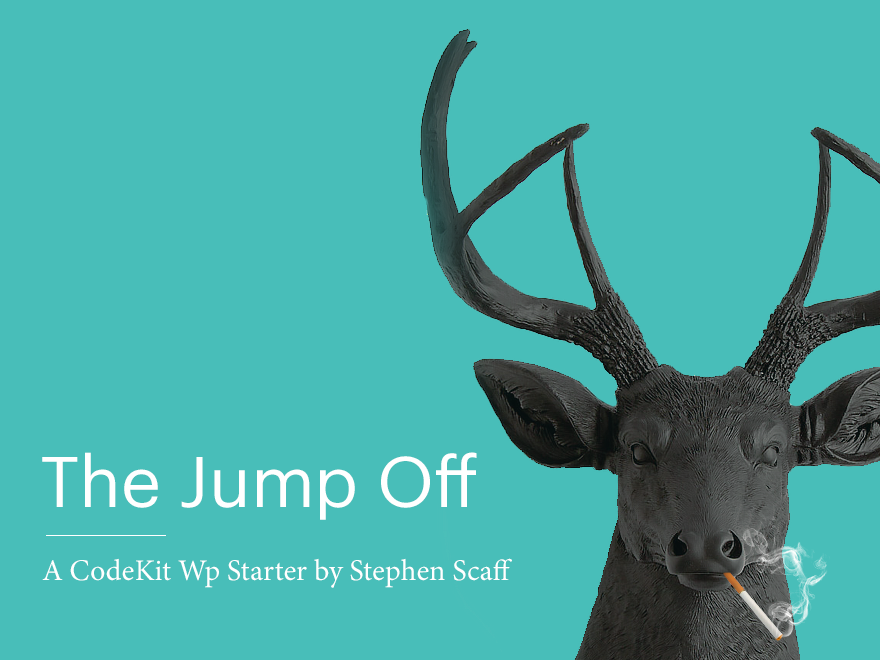
<style>
.page{position:relative;width:880px;height:660px;background:#48beb9}
.page>*{position:absolute;margin:0}
.t1{font:70px "Graphik-Regular";color:#ffffff}
.t2{font:30px "MinionPro-Regular";color:#ffffff}
</style>
<div class="page">
<p class="t1" style="left:42px;top:452px;width:435px;height:68px">The Jump Off</p>
<p class="t2" style="left:42px;top:558px;width:470px;height:30px">A CodeKit Wp Starter by Stephen Scaff</p>
</div>
